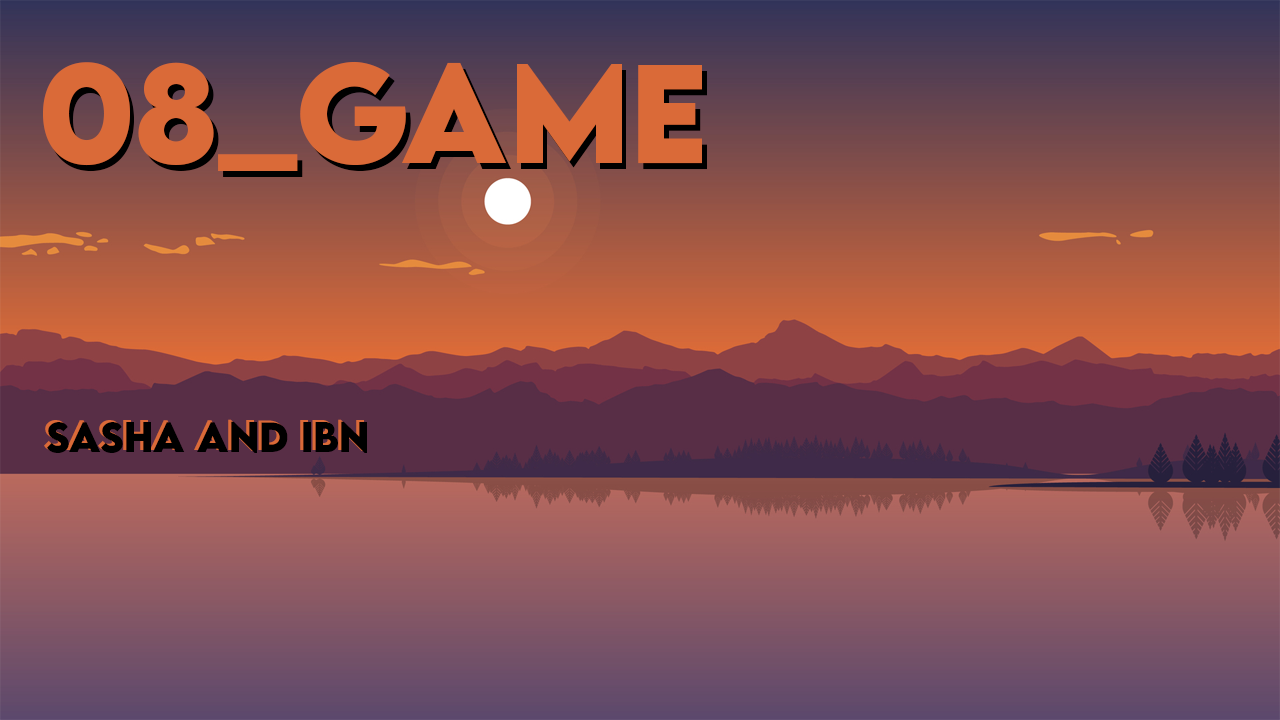
<style>
.page{position:relative;width:1280px;height:720px}
.page>*{position:absolute;margin:0}
.t1{font:125px "LEMONMILK-Bold";color:#da6a38}
.t2{font:37.5px "LEMONMILK-Bold"}
.t3{font:37.5px "LEMONMILK-Bold";color:#000000}
</style>
<div class="page">
<p class="t1" style="left:43px;top:61px;width:659px;height:110px">08_Game</p>
<p class="t1" style="left:47px;top:67px;width:660px;height:110px">08_Game</p>
<p class="t2" style="left:44px;top:419px;width:320px;height:32px">Sasha and ibn</p>
<p class="t3" style="left:47px;top:421px;width:320px;height:32px">Sasha and ibn</p>
</div>
